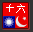
<style>
.page{position:relative;width:33px;height:32px;background:#f20000}
.page>*{position:absolute;margin:0}
.t1{font:10.4px "SimSun";color:#ffffff}
</style>
<div class="page">
<p class="t1" style="left:6px;top:4px;width:19px;height:9px">十六</p>
</div>
